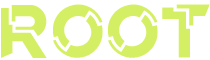
<style>
.page{position:relative;width:210px;height:60px;background:#ffffff}
.page>*{position:absolute;margin:0}
.t1{font:76px "OriginTechDemoRegular";color:#d4ef63}
</style>
<div class="page">
<p class="t1" style="left:1px;top:4px;width:209px;height:54px">ROOT</p>
</div>
